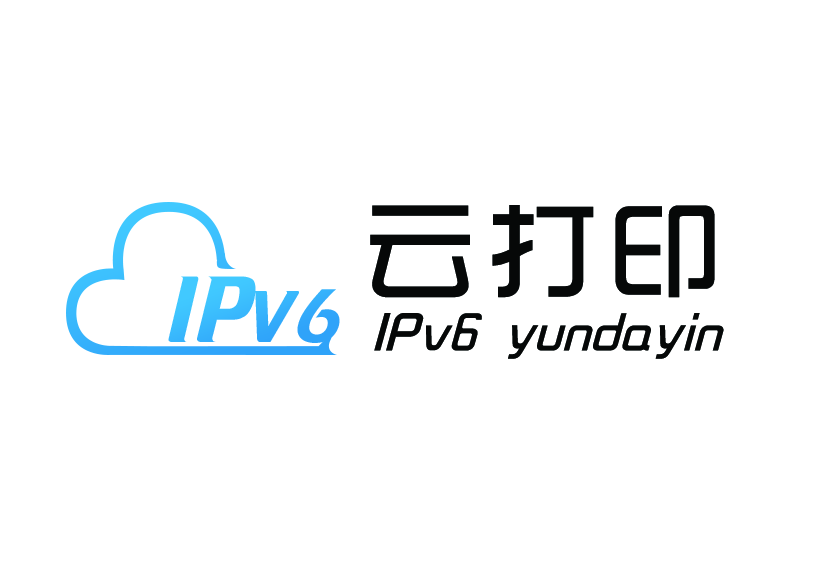
<style>
.page{position:relative;width:827px;height:572px;background:#ffffff}
.page>*{position:absolute;margin:0}
.t1{font:110.6px "TRENDS";letter-spacing:0.087em;color:#060808;font-weight:bold}
.t2{font:82px "CrilleeMedium";color:#39b9fd}
.t3{font:79.2px "CrilleeMedium";color:#39b9fd}
.t4{font:52.1px "TRENDS";letter-spacing:0.044em;color:#060808;scale:0.96 1}
</style>
<div class="page">
<p class="t1" style="left:370px;top:205px;width:345px;height:93px">云打印</p>
<p class="t2" style="left:168px;top:276px;width:172px;height:67px">IP<span class="t3">v6</span></p>
<p class="t4" style="left:374px;top:313px;width:350px;height:46px">IPv6 yundayin</p>
</div>
